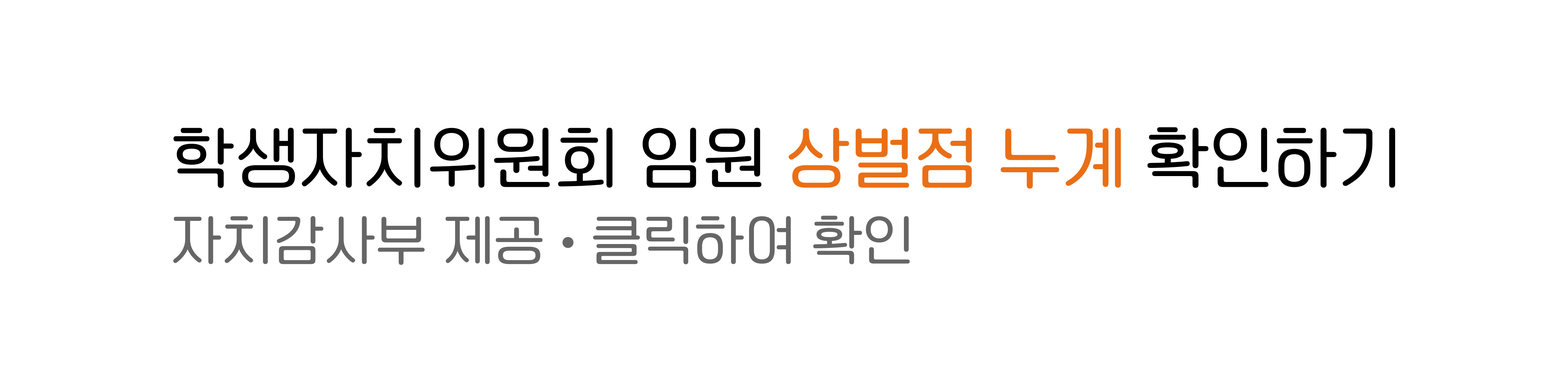
<style>
.page{position:relative;width:1568px;height:392px;background:#ffffff}
.page>*{position:absolute;margin:0}
.t1{font:65.3px/78.4px "OTOmniGulimM";color:#000000}
.t2{font:65.3px/78.4px "OTOmniGulimM";color:#e96f16}
.t3{font:52.3px/78.4px "OTOmniGulimM";color:#666666}
.t4{font:52.3px/78.4px "MyriadPro-Regular";color:#666666}
</style>
<div class="page">
<p class="t1" style="left:173px;top:127px;width:1222px;height:138px">학생자치위원회 임원 <span class="t2">상벌점 누계</span> 확인하기<br><span class="t3">자치감사부 제공 </span><span class="t4">•</span><span class="t3"> 클릭하여 확인</span></p>
</div>
